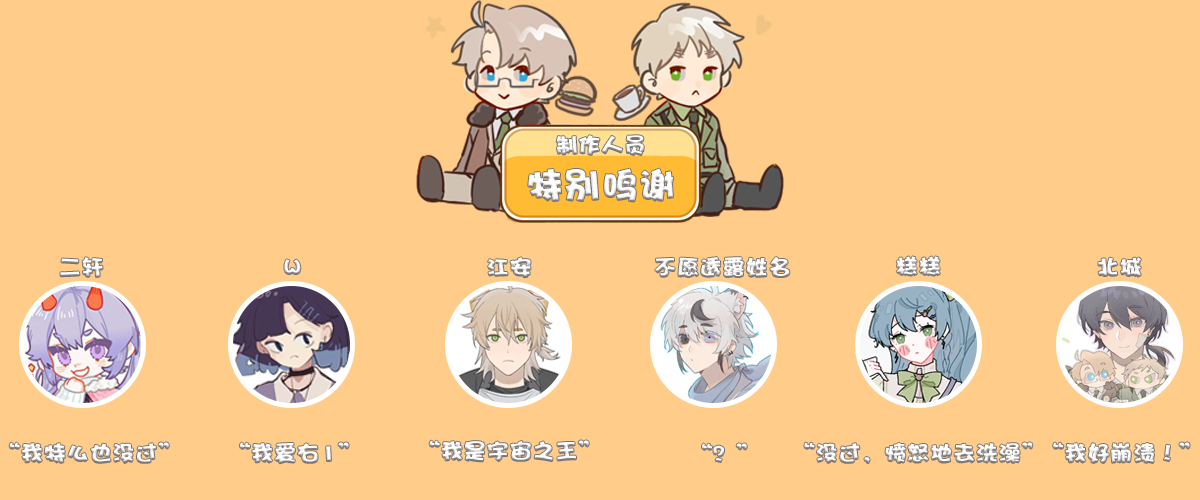
<style>
.page{position:relative;width:1200px;height:500px;background:#ffcc8a}
.page>*{position:absolute;margin:0}
.t1{font:22px "DFPHaiBaoW12";letter-spacing:0.04em;color:#ffffff;text-transform:uppercase}
.t2{font:36px "DFPHaiBaoW12";letter-spacing:0.04em;color:#ffffff;text-transform:uppercase}
</style>
<div class="page">
<p class="t1" style="left:556px;top:135px;width:88px;height:21px">制作人员</p>
<p class="t2" style="left:528px;top:168px;width:145px;height:34px">特别鸣谢</p>
<p class="t1" style="left:60px;top:257px;width:43px;height:20px">二轩</p>
<p class="t1" style="left:488px;top:257px;width:43px;height:21px">江安</p>
<p class="t1" style="left:655px;top:257px;width:135px;height:20px">不愿透露姓名</p>
<p class="t1" style="left:896px;top:256px;width:44px;height:20px">糕糕</p>
<p class="t1" style="left:1098px;top:257px;width:43px;height:20px">北城</p>
<p class="t1" style="left:284px;top:259px;width:17px;height:15px">w</p>
<p class="t1" style="left:9px;top:442px;width:160px;height:22px">“我特么也没过”</p>
<p class="t1" style="left:240px;top:442px;width:109px;height:22px">“我爱右1”</p>
<p class="t1" style="left:429px;top:440px;width:160px;height:22px">“我是宇宙之王”</p>
<p class="t1" style="left:702px;top:443px;width:45px;height:19px">“？”</p>
<p class="t1" style="left:804px;top:442px;width:229px;height:22px">“没过，愤怒地去洗澡”</p>
<p class="t1" style="left:1053px;top:442px;width:137px;height:22px">“我好崩溃！”</p>
</div>
